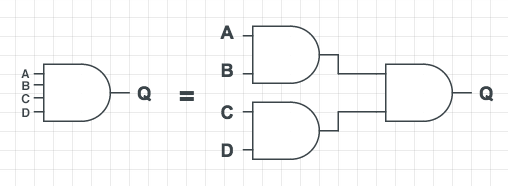
<style>
.page{position:relative;width:508px;height:186px;background:#ffffff}
.page>*{position:absolute;margin:0}
.t1{font:12px "Helvetica-Bold";letter-spacing:0.02em;color:#3b4449}
</style>
<div class="page">
<p class="t1" style="left:21px;top:69px;width:9px;height:9px">A</p>
<p class="t1" style="left:22px;top:81px;width:8px;height:9px">B</p>
<p class="t1" style="left:21px;top:94px;width:9px;height:10px">C</p>
<p class="t1" style="left:22px;top:108px;width:8px;height:9px">D</p>
</div>
